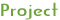
<style>
.page{position:relative;width:60px;height:20px;background:#ffffff}
.page>*{position:absolute;margin:0}
.t1{font:15.9px "ArchitecturePlain";color:#6ea337;scale:1.8 1}
</style>
<div class="page">
<p class="t1" style="left:1px;top:2px;width:57px;height:18px">Project</p>
</div>
